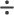
<style>
.page{position:relative;width:14px;height:15px;background:#ffffff}
.page>*{position:absolute;margin:0}
.t1{font:30px "Calibri";color:#3c3c3c}
</style>
<div class="page">
<p class="t1" style="left:0px;top:0px;width:14px;height:15px">÷</p>
</div>
